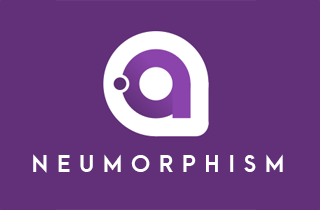
<style>
.page{position:relative;width:320px;height:210px;background:#623079}
.page>*{position:absolute;margin:0}
.t1{font:22px "ArcaMajora2-Heavy";letter-spacing:0.4em;color:#ffffff;text-transform:uppercase}
</style>
<div class="page">
<p class="t1" style="left:33px;top:154px;width:250px;height:19px">NEUMORPHISM</p>
</div>
